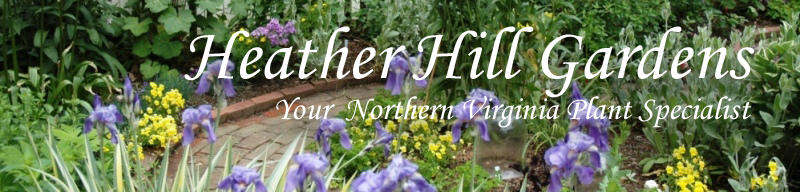
<style>
.page{position:relative;width:800px;height:192px}
.page>*{position:absolute;margin:0}
.t1{font:74.7px "MonotypeCorsiva";color:#ffffff}
.t2{font:33.2px "MonotypeCorsiva";color:#ffffff}
</style>
<div class="page">
<p class="t1" style="left:184px;top:26px;width:571px;height:72px">Heather Hill Gardens</p>
<p class="t2" style="left:276px;top:96px;width:476px;height:32px">Your  Northern Virginia Plant Specialist</p>
</div>
